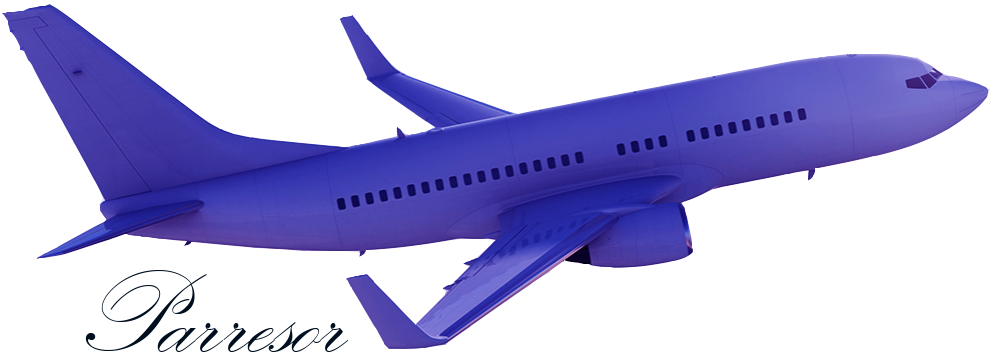
<style>
.page{position:relative;width:990px;height:360px;background:#ffffff}
.page>*{position:absolute;margin:0}
.t1{font:120px "KunstlerScript";color:#000f1f}
</style>
<div class="page">
<p class="t1" style="left:85px;top:270px;width:264px;height:82px">Parresor</p>
</div>
